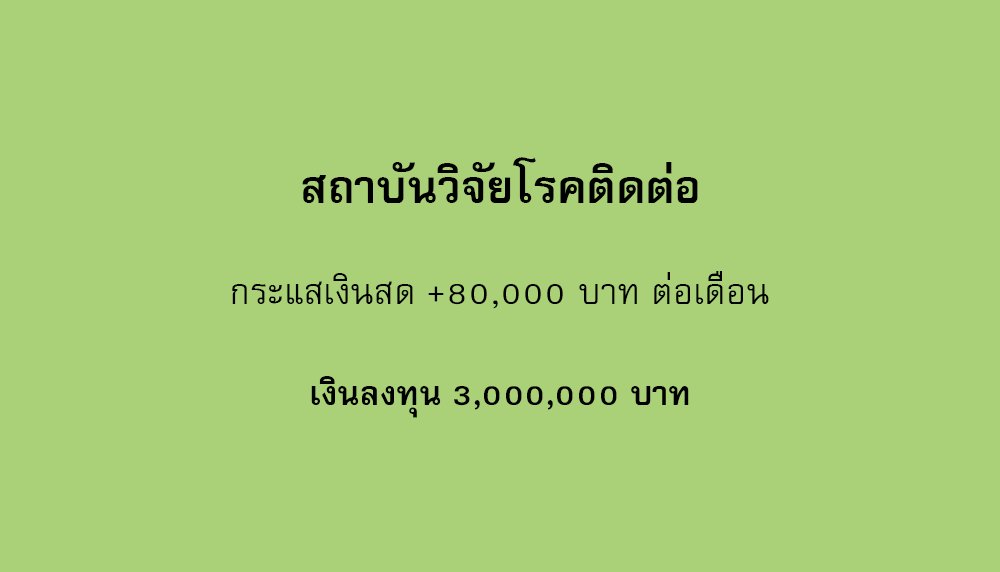
<style>
.page{position:relative;width:1000px;height:572px;background:#aad178}
.page>*{position:absolute;margin:0}
.t1{font:64px "FreesiaUPCBold";color:#000000}
.t2{font:50px "FreesiaUPC";color:#000000}
.t3{font:47px "FreesiaUPCBold";color:#000000}
</style>
<div class="page">
<p class="t1" style="left:302px;top:157px;width:396px;height:46px">สถาบันวิจัยโรคติดต่อ</p>
<p class="t2" style="left:232px;top:271px;width:537px;height:38px">กระแสเงินสด +80,000 บาท ต่อเดือน</p>
<p class="t3" style="left:311px;top:376px;width:378px;height:42px">เงินลงทุน 3,000,000 บาท</p>
</div>
